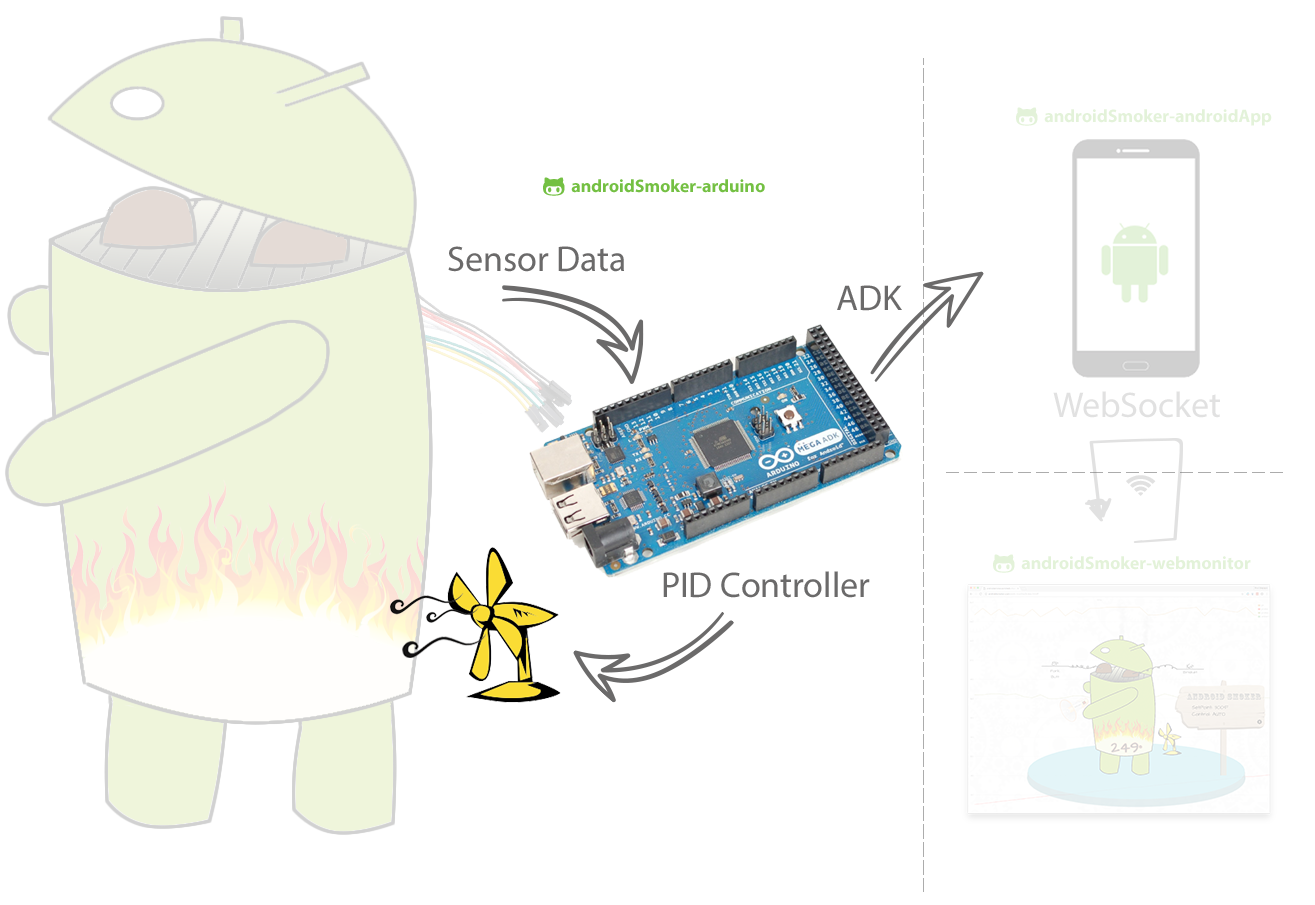
<style>
.page{position:relative;width:1315px;height:905px;background:#ffffff}
.page>*{position:absolute;margin:0}
.t1{font:18px "MyriadPro-Bold";color:#e3f2d9}
.t2{font:18px "MyriadPro-Bold";color:#74c043}
.t3{font:36px "MyriadPro-Regular";color:#6b6a6a}
.t4{font:36px "MyriadPro-Regular";color:#e1e1e1}
</style>
<div class="page">
<p class="t1" style="left:1044px;top:109px;width:228px;height:17px">androidSmoker-androidApp</p>
<p class="t2" style="left:571px;top:179px;width:194px;height:14px">androidSmoker-arduino</p>
<p class="t3" style="left:448px;top:246px;width:176px;height:26px">Sensor Data</p>
<p class="t3" style="left:837px;top:285px;width:65px;height:26px">ADK</p>
<p class="t4" style="left:1053px;top:391px;width:167px;height:27px">WebSocket</p>
<p class="t1" style="left:1021px;top:556px;width:230px;height:14px">androidSmoker-webmonitor</p>
<p class="t3" style="left:663px;top:571px;width:207px;height:27px">PID Controller</p>
</div>
